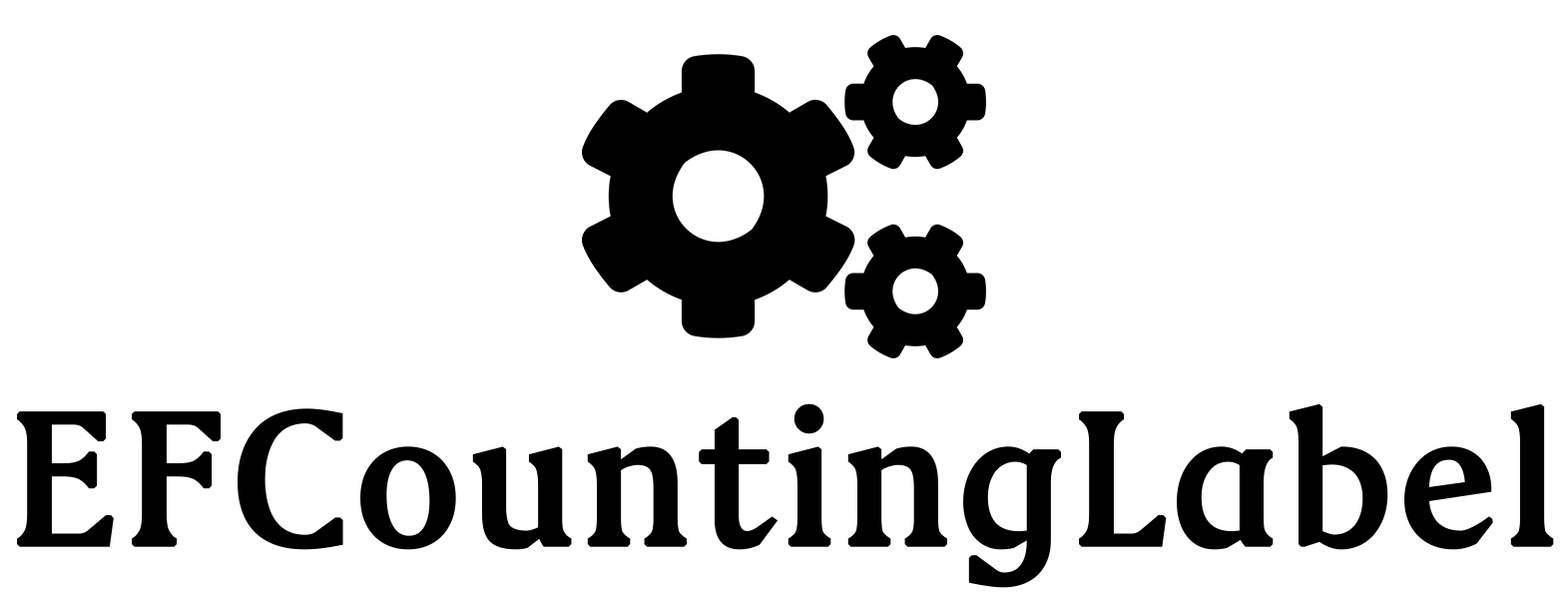
<style>
.page{position:relative;width:1568px;height:599px;background:#ffffff}
.page>*{position:absolute;margin:0}
.t1{font:198.6px "WeibeiSC-Bold";color:#000000;font-weight:bold}
</style>
<div class="page">
<p class="t1" style="left:17px;top:403px;width:1537px;height:185px">EFCountingLabel</p>
</div>
